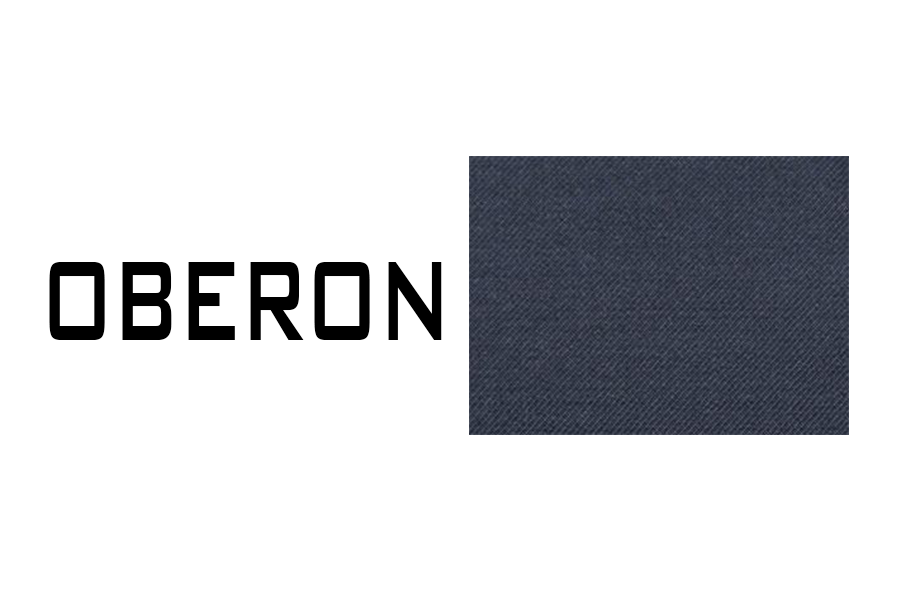
<style>
.page{position:relative;width:900px;height:600px;background:#ffffff}
.page>*{position:absolute;margin:0}
.t1{font:183.9px "BankGothicBT-Medium";color:#000000;scale:0.55 1}
</style>
<div class="page">
<p class="t1" style="left:49px;top:262px;width:393px;height:78px">oberon</p>
</div>
